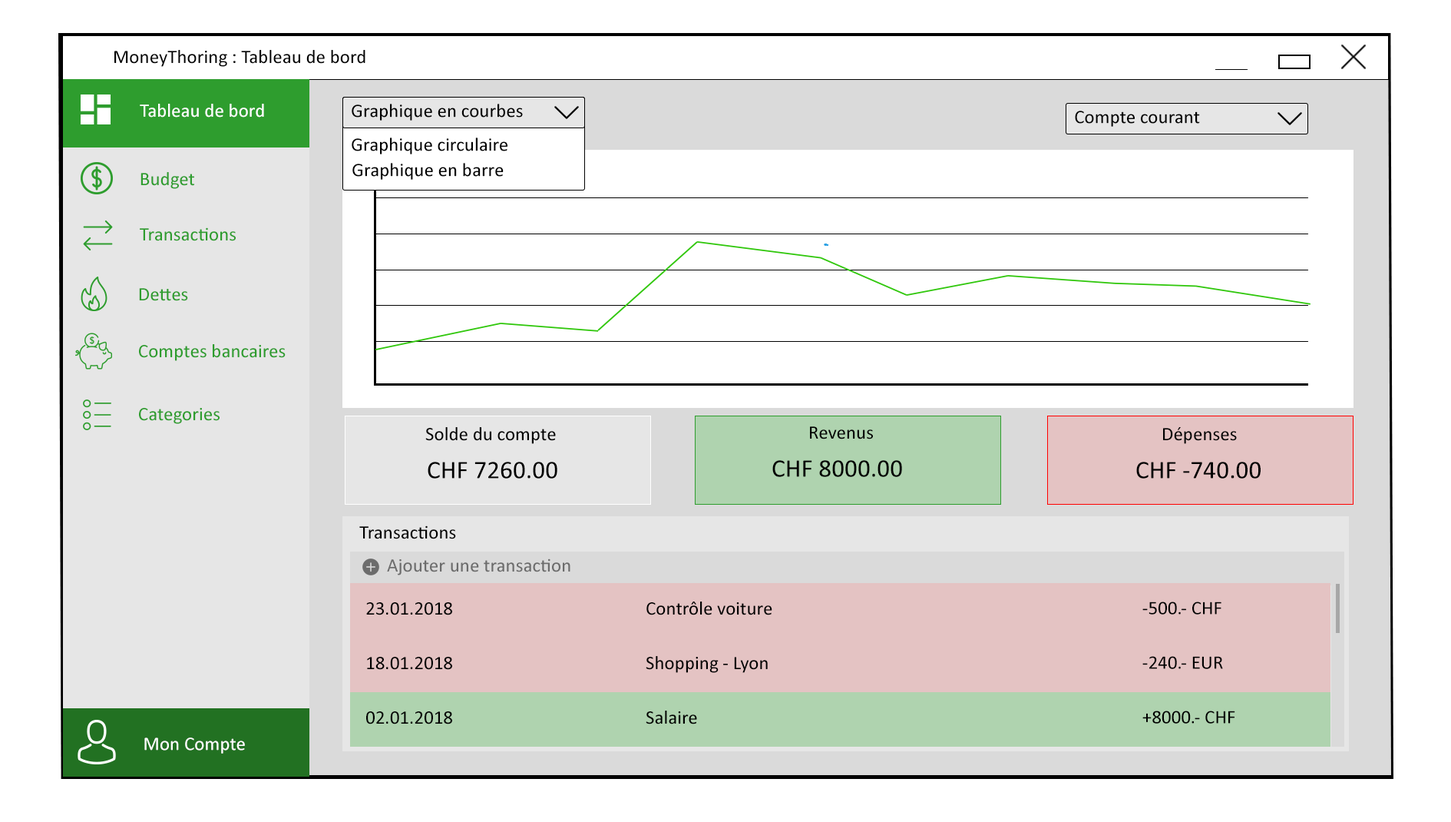
<style>
.page{position:relative;width:1451px;height:822px;background:#ffffff}
.page>*{position:absolute;margin:0}
.t1{font:19.2px "Calibri";color:#010101}
.t2{font:19.2px "Calibri";color:#ffffff}
.t3{font:19.2px "Calibri";color:#000000}
.t4{font:19.2px "Calibri";color:#2e9d2e}
.t5{font:25.6px "Calibri";color:#000000}
.t6{font:19.2px "Calibri";color:#6c6c6c}
</style>
<div class="page">
<p class="t1" style="left:114px;top:50px;width:252px;height:17px">MoneyThoring : Tableau de bord</p>
<p class="t2" style="left:140px;top:104px;width:124px;height:13px">Tableau de bord</p>
<p class="t3" style="left:352px;top:104px;width:171px;height:17px">Graphique en courbes</p>
<p class="t3" style="left:1075px;top:111px;width:125px;height:16px">Compte courant</p>
<p class="t3" style="left:352px;top:137px;width:156px;height:17px">Graphique circulaire</p>
<p class="t4" style="left:141px;top:172px;width:53px;height:17px">Budget</p>
<p class="t3" style="left:352px;top:163px;width:152px;height:17px">Graphique en barre</p>
<p class="t4" style="left:140px;top:227px;width:96px;height:14px">Transactions</p>
<p class="t4" style="left:139px;top:288px;width:49px;height:13px">Dettes</p>
<p class="t4" style="left:139px;top:344px;width:147px;height:17px">Comptes bancaires</p>
<p class="t4" style="left:139px;top:408px;width:81px;height:16px">Categories</p>
<p class="t1" style="left:425px;top:427px;width:131px;height:17px">Solde du compte</p>
<p class="t1" style="left:810px;top:426px;width:63px;height:13px">Revenus</p>
<p class="t1" style="left:1163px;top:427px;width:74px;height:17px">Dépenses</p>
<p class="t5" style="left:428px;top:461px;width:129px;height:17px">CHF 7260.00</p>
<p class="t5" style="left:772px;top:460px;width:130px;height:17px">CHF 8000.00</p>
<p class="t5" style="left:1136px;top:461px;width:125px;height:17px">CHF -740.00</p>
<p class="t3" style="left:359px;top:525px;width:97px;height:14px">Transactions</p>
<p class="t6" style="left:387px;top:558px;width:184px;height:17px">Ajouter une transaction</p>
<p class="t3" style="left:366px;top:602px;width:86px;height:13px">23.01.2018</p>
<p class="t3" style="left:647px;top:601px;width:125px;height:14px">Contrôle voiture</p>
<p class="t3" style="left:1143px;top:601px;width:79px;height:13px">-500.- CHF</p>
<p class="t3" style="left:367px;top:657px;width:85px;height:13px">18.01.2018</p>
<p class="t3" style="left:646px;top:656px;width:122px;height:17px">Shopping - Lyon</p>
<p class="t3" style="left:1143px;top:656px;width:80px;height:13px">-240.- EUR</p>
<p class="t3" style="left:366px;top:711px;width:86px;height:13px">02.01.2018</p>
<p class="t3" style="left:646px;top:710px;width:51px;height:14px">Salaire</p>
<p class="t3" style="left:1143px;top:710px;width:93px;height:13px">+8000.- CHF</p>
<p class="t2" style="left:144px;top:737px;width:101px;height:16px">Mon Compte</p>
</div>
